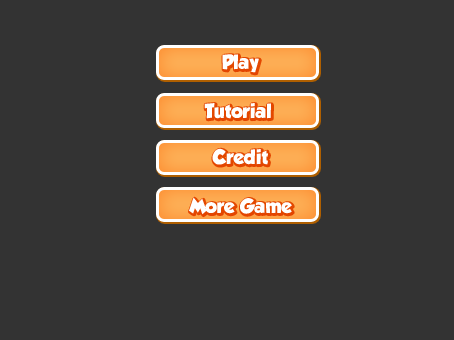
<style>
.page{position:relative;width:454px;height:340px;background:#333333}
.page>*{position:absolute;margin:0}
.t1{font:18px "GROBOLD";color:#ffffff}
</style>
<div class="page">
<p class="t1" style="left:222px;top:54px;width:37px;height:19px">Play</p>
<p class="t1" style="left:204px;top:103px;width:67px;height:16px">Tutorial</p>
<p class="t1" style="left:212px;top:148px;width:56px;height:17px">Credit</p>
<p class="t1" style="left:189px;top:197px;width:103px;height:18px">More Game</p>
</div>
